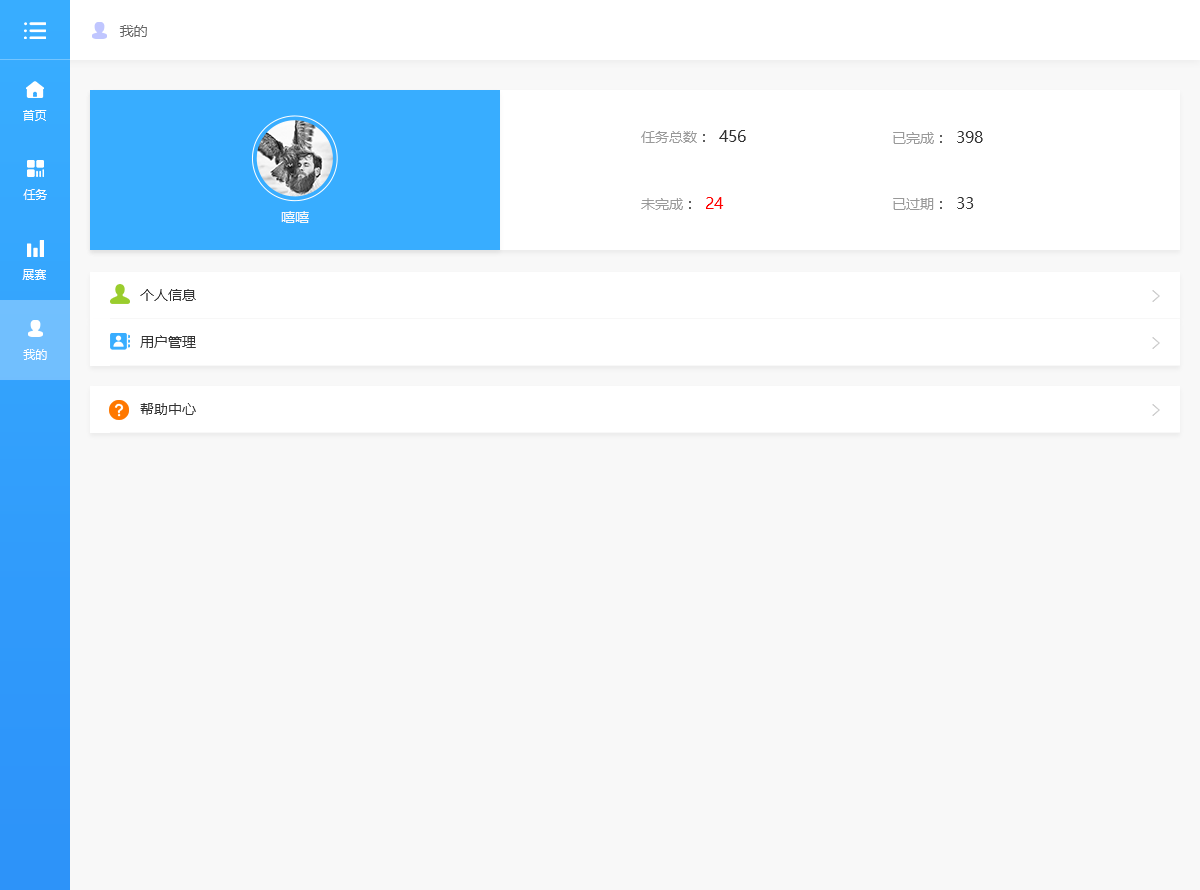
<style>
.page{position:relative;width:1200px;height:890px;background:#f8f8f8}
.page>*{position:absolute;margin:0}
.t1{font:14px "MicrosoftYaHei";color:#666666}
.t2{font:12px "MicrosoftYaHei";color:#ffffff}
.t3{font:14px "MicrosoftYaHei";color:#999999}
.t4{font:14px "MicrosoftYaHei";color:#333333}
.t5{font:16px "MicrosoftYaHei";color:#333333}
.t6{font:16px "MicrosoftYaHei";color:#ff0000}
.t7{font:14px "MicrosoftYaHei";color:#f8f8f8}
</style>
<div class="page">
<p class="t1" style="left:119px;top:25px;width:28px;height:12px">我的</p>
<p class="t2" style="left:23px;top:110px;width:24px;height:11px">首页</p>
<p class="t3" style="left:641px;top:130px;width:105px;height:13px">任务总数<span class="t4">：  </span><span class="t5">456</span></p>
<p class="t3" style="left:893px;top:131px;width:90px;height:13px">已完成<span class="t4">：  </span><span class="t5">398</span></p>
<p class="t2" style="left:23px;top:189px;width:24px;height:11px">任务</p>
<p class="t3" style="left:641px;top:197px;width:83px;height:13px">未完成<span class="t4">：  </span><span class="t6">24</span></p>
<p class="t3" style="left:893px;top:197px;width:81px;height:13px">已过期<span class="t4">：  </span><span class="t5">33</span></p>
<p class="t7" style="left:281px;top:211px;width:28px;height:12px">嘻嘻</p>
<p class="t2" style="left:22px;top:269px;width:24px;height:11px">展赛</p>
<p class="t4" style="left:140px;top:289px;width:56px;height:12px">个人信息</p>
<p class="t4" style="left:140px;top:335px;width:56px;height:13px">用户管理</p>
<p class="t2" style="left:23px;top:349px;width:24px;height:11px">我的</p>
<p class="t4" style="left:140px;top:403px;width:56px;height:12px">帮助中心</p>
</div>
